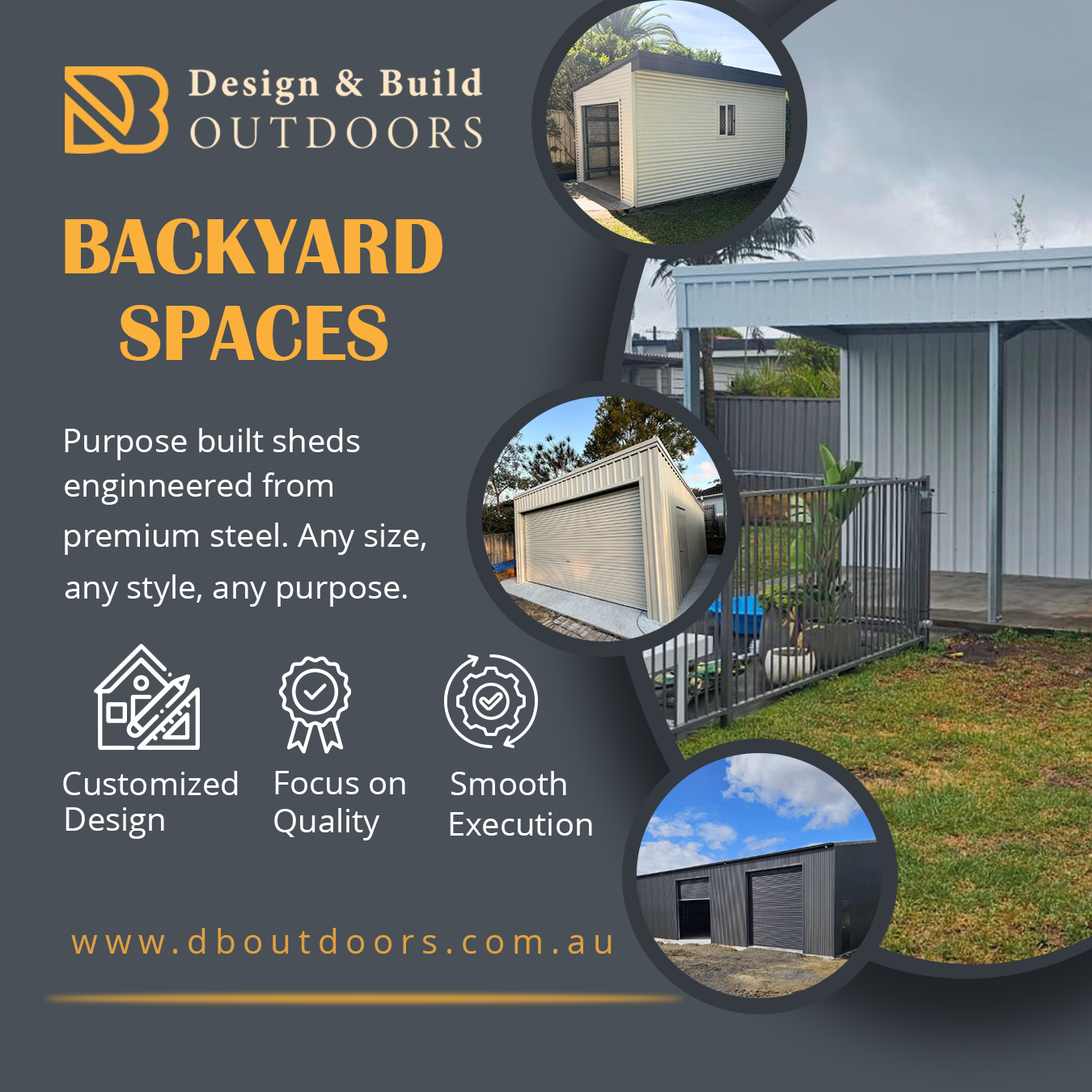
<style>
.page{position:relative;width:1092px;height:1092px;background:#495057}
.page>*{position:absolute;margin:0}
.t1{font:80.9px "BritannicBold";color:#fbb03b;font-variant:small-caps}
.t2{font:32.4px "OpenSans";color:#ffffff}
.t3{font:34px "OpenSans";letter-spacing:0.21em;color:#dea040}
</style>
<div class="page">
<p class="t1" style="left:65px;top:218px;width:377px;height:56px">BACKYARD</p>
<p class="t1" style="left:120px;top:305px;width:268px;height:56px">SPACES</p>
<p class="t2" style="left:65px;top:428px;width:295px;height:32px">Purpose built sheds</p>
<p class="t2" style="left:65px;top:472px;width:267px;height:33px">enginneered from</p>
<p class="t2" style="left:65px;top:523px;width:360px;height:32px">premium steel. Any size,</p>
<p class="t2" style="left:65px;top:574px;width:342px;height:33px">any style, any purpose.</p>
<p class="t2" style="left:63px;top:771px;width:175px;height:24px">Customized</p>
<p class="t2" style="left:275px;top:771px;width:130px;height:23px">Focus on</p>
<p class="t2" style="left:451px;top:771px;width:115px;height:24px">Smooth</p>
<p class="t2" style="left:66px;top:807px;width:98px;height:32px">Design</p>
<p class="t2" style="left:274px;top:808px;width:105px;height:32px">Quality</p>
<p class="t2" style="left:450px;top:812px;width:142px;height:24px">Execution</p>
<p class="t3" style="left:71px;top:928px;width:541px;height:26px">www.dboutdoors.com.au</p>
</div>
